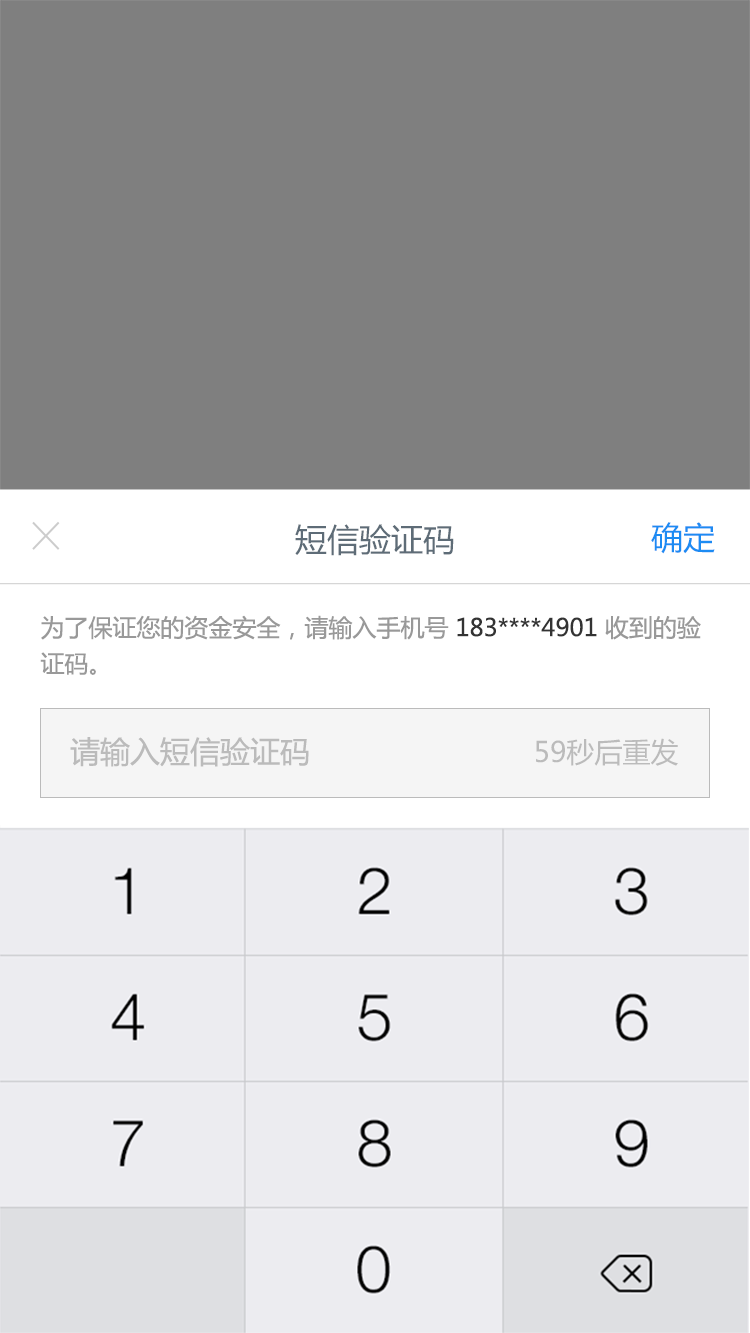
<style>
.page{position:relative;width:750px;height:1333px;background:#7f7f7f}
.page>*{position:absolute;margin:0}
.t1{font:32px "MicrosoftYaHei";color:#5e6c77}
.t2{font:32px "MicrosoftYaHei";color:#1c8bf3}
.t3{font:24px/36px "MicrosoftYaHei";color:#999999}
.t4{font:24px/36px "MicrosoftYaHei";color:#333333}
.t5{font:30px "MicrosoftYaHei";color:#bbbbbb}
.t6{font:28px "MicrosoftYaHei";color:#bbbbbb}
</style>
<div class="page">
<p class="t1" style="left:295px;top:524px;width:159px;height:32px">短信验证码</p>
<p class="t2" style="left:651px;top:522px;width:64px;height:32px">确定</p>
<p class="t3" style="left:40px;top:615px;width:661px;height:60px">为了保证您的资金安全，请输入手机号 <span class="t4">183****4901</span> 收到的验<br>证码。</p>
<p class="t5" style="left:70px;top:737px;width:239px;height:30px">请输入短信验证码</p>
<p class="t6" style="left:536px;top:738px;width:142px;height:28px">59秒后重发</p>
</div>
